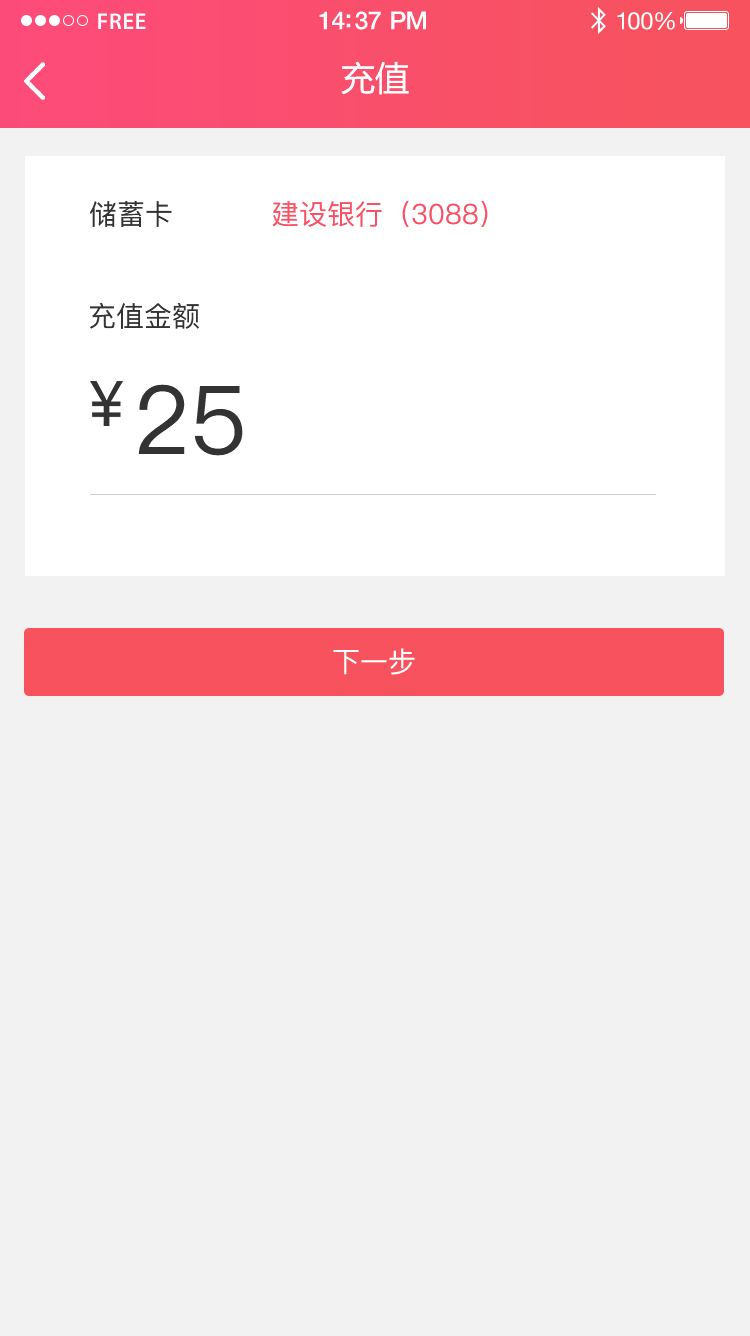
<style>
.page{position:relative;width:750px;height:1336px;background:#f2f2f2}
.page>*{position:absolute;margin:0}
.t1{font:23px "MyriadPro-Semibold";letter-spacing:0.02em;color:#ffffff}
.t2{font:25px "HelveticaNeue-Medium";letter-spacing:-0.02em;color:#ffffff}
.t3{font:24px "HelveticaNeue";letter-spacing:-0.02em;color:#ffffff}
.t4{font:34px "MicrosoftYaHei";color:#ffffff;text-transform:uppercase}
.t5{font:28px "PingFang-SC-Medium";color:#333333;text-transform:uppercase}
.t6{font:28px "PingFang-SC-Medium";color:#f95066;text-transform:uppercase}
.t7{font:95.2px "PingFang-SC-Medium";color:#333333;text-transform:uppercase}
.t8{font:28px "PingFang-SC-Medium";color:#ffffff;text-transform:uppercase}
</style>
<div class="page">
<p class="t1" style="left:98px;top:13px;width:48px;height:16px">FREE</p>
<p class="t2" style="left:319px;top:11px;width:107px;height:19px">14:37 PM</p>
<p class="t3" style="left:617px;top:12px;width:58px;height:18px">100%</p>
<p class="t4" style="left:341px;top:61px;width:68px;height:34px">充值</p>
<p class="t5" style="left:90px;top:201px;width:82px;height:26px">储蓄卡</p>
<p class="t6" style="left:272px;top:200px;width:216px;height:27px">建设银行（3088）</p>
<p class="t5" style="left:90px;top:303px;width:109px;height:26px">充值金额</p>
<p class="t7" style="left:138px;top:384px;width:105px;height:72px">25</p>
<p class="t8" style="left:333px;top:648px;width:82px;height:27px">下一步</p>
</div>
